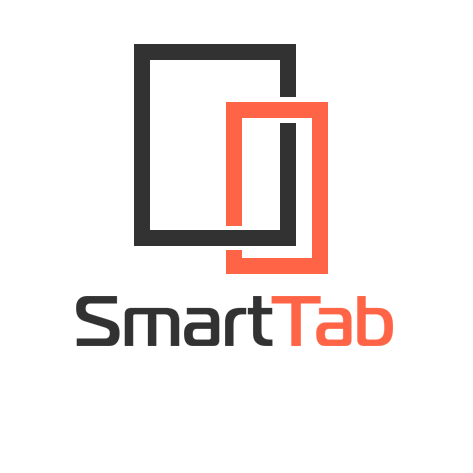
<style>
.page{position:relative;width:473px;height:473px;background:#ffffff}
.page>*{position:absolute;margin:0}
.t1{font:71.4px "MagistralC-Bold";color:#323232}
.t2{font:71.4px "MagistralC-Bold";color:#ff6446}
</style>
<div class="page">
<p class="t1" style="left:76px;top:296px;width:317px;height:50px">Smart<span class="t2">Tab</span></p>
</div>
